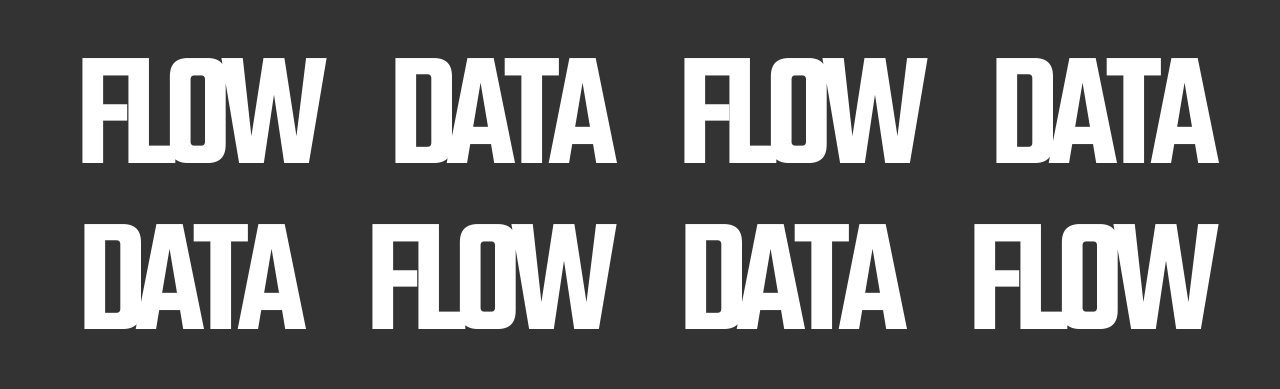
<style>
.page{position:relative;width:1280px;height:389px;background:#333333}
.page>*{position:absolute;margin:0}
.t1{font:164.8px "Teko-SemiBold";letter-spacing:-0.08em;color:#ffffff;scale:0.87 1}
</style>
<div class="page">
<p class="t1" style="left:82px;top:58px;width:1137px;height:105px">FLOW     DATA     FLOW     DATA</p>
<p class="t1" style="left:84px;top:224px;width:1135px;height:105px">DATA     FLOW     DATA     FLOW</p>
</div>
